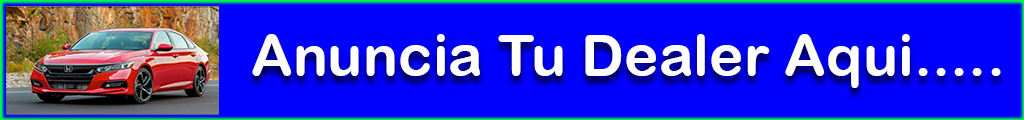
<style>
.page{position:relative;width:1024px;height:120px;background:#0000ff}
.page>*{position:absolute;margin:0}
.t1{font:58.3px "ArialRoundedMTBold";color:#ffffff}
</style>
<div class="page">
<p class="t1" style="left:252px;top:34px;width:749px;height:54px">Anuncia Tu Dealer Aqui.....</p>
</div>
